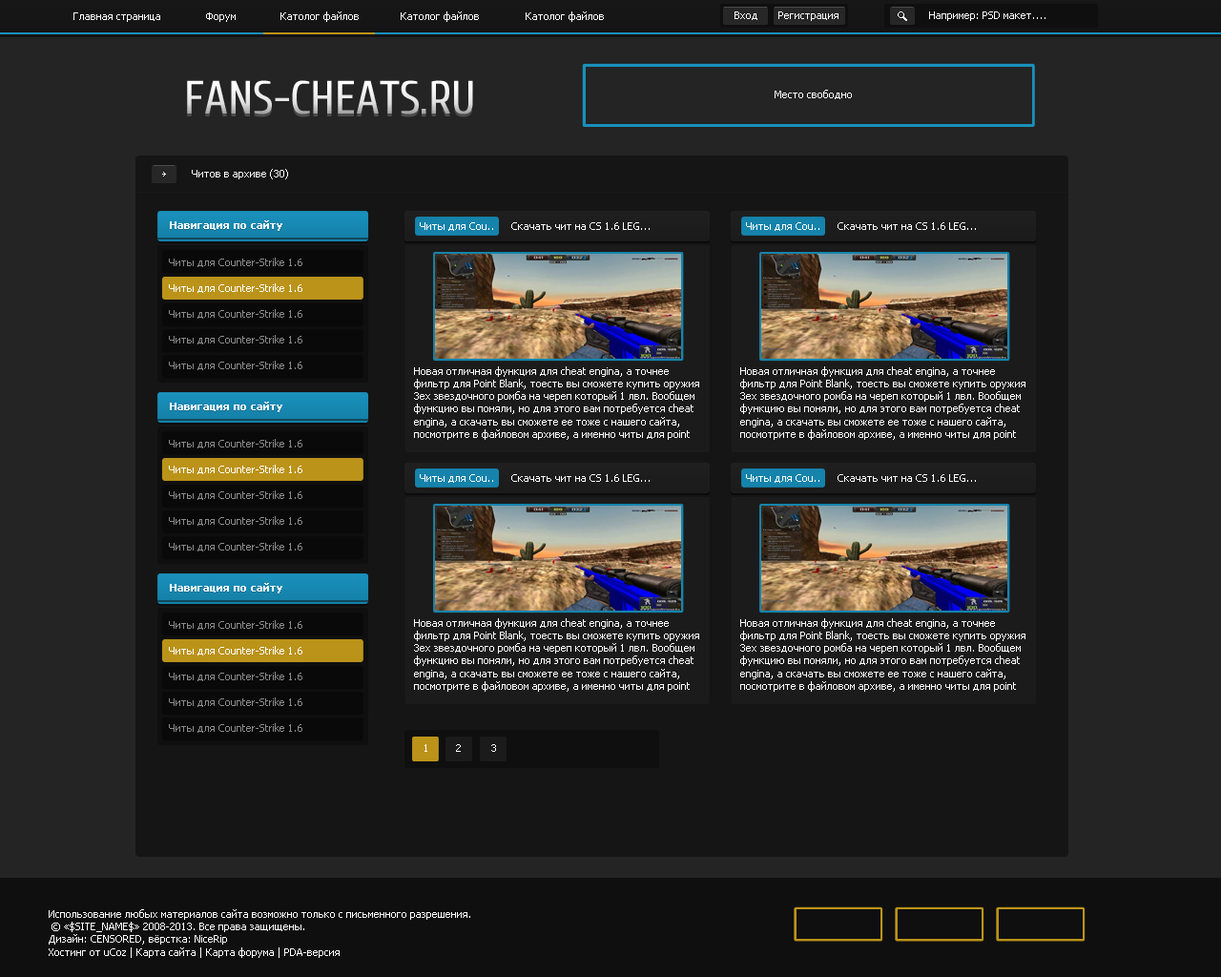
<style>
.page{position:relative;width:1221px;height:977px;background:#242424}
.page>*{position:absolute;margin:0}
.t1{font:10.5px "Tahoma";color:#ffffff}
.t2{font:10.2px "Tahoma";color:#ffffff}
.t3{font:10.5px "Tahoma";color:#ffffff;font-weight:bold}
.t4{font:10.5px "Tahoma";color:#8b8b8b}
</style>
<div class="page">
<p class="t1" style="left:73px;top:12px;width:87px;height:10px">Главная страница</p>
<p class="t1" style="left:206px;top:12px;width:30px;height:10px">Форум</p>
<p class="t1" style="left:280px;top:11px;width:79px;height:11px">Католог файлов</p>
<p class="t1" style="left:401px;top:11px;width:78px;height:11px">Католог файлов</p>
<p class="t1" style="left:526px;top:11px;width:78px;height:11px">Католог файлов</p>
<p class="t1" style="left:734px;top:11px;width:23px;height:9px">Вход</p>
<p class="t1" style="left:778px;top:11px;width:60px;height:10px">Регистрация</p>
<p class="t2" style="left:929px;top:11px;width:116px;height:10px">Например: PSD макет....</p>
<p class="t1" style="left:774px;top:90px;width:78px;height:9px">Место свободно</p>
<p class="t1" style="left:192px;top:169px;width:96px;height:10px">Читов в архиве (30)</p>
<p class="t3" style="left:170px;top:220px;width:112px;height:11px">Навигация по сайту</p>
<p class="t1" style="left:420px;top:222px;width:73px;height:9px">Читы для Cou..</p>
<p class="t1" style="left:511px;top:222px;width:139px;height:8px">Скачать чит на CS 1.6 LEG...</p>
<p class="t1" style="left:746px;top:222px;width:73px;height:9px">Читы для Cou..</p>
<p class="t1" style="left:837px;top:222px;width:139px;height:8px">Скачать чит на CS 1.6 LEG...</p>
<p class="t4" style="left:169px;top:258px;width:133px;height:9px">Читы для Counter-Strike 1.6</p>
<p class="t1" style="left:169px;top:283px;width:133px;height:10px">Читы для Counter-Strike 1.6</p>
<p class="t1" style="left:414px;top:366px;width:285px;height:74px">Новая отличная функция для cheat engina, а точнее фильтр для Point Blank, тоесть вы сможете купить оружия 3ех звездочного ромба на череп который 1 лвл. Вообщем функцию вы поняли, но для этого вам потребуется cheat engina, а скачать вы сможете ее тоже с нашего сайта, посмотрите в файловом архиве, а именно читы для point blank. Чит обходит систему античита фроста.</p>
<p class="t1" style="left:740px;top:366px;width:285px;height:74px">Новая отличная функция для cheat engina, а точнее фильтр для Point Blank, тоесть вы сможете купить оружия 3ех звездочного ромба на череп который 1 лвл. Вообщем функцию вы поняли, но для этого вам потребуется cheat engina, а скачать вы сможете ее тоже с нашего сайта, посмотрите в файловом архиве, а именно читы для point blank. Чит обходит систему античита фроста.</p>
<p class="t3" style="left:170px;top:402px;width:112px;height:10px">Навигация по сайту</p>
<p class="t4" style="left:169px;top:439px;width:133px;height:9px">Читы для Counter-Strike 1.6</p>
<p class="t1" style="left:169px;top:465px;width:133px;height:9px">Читы для Counter-Strike 1.6</p>
<p class="t1" style="left:420px;top:474px;width:73px;height:9px">Читы для Cou..</p>
<p class="t1" style="left:511px;top:474px;width:139px;height:8px">Скачать чит на CS 1.6 LEG...</p>
<p class="t1" style="left:746px;top:474px;width:73px;height:9px">Читы для Cou..</p>
<p class="t1" style="left:837px;top:474px;width:139px;height:8px">Скачать чит на CS 1.6 LEG...</p>
<p class="t3" style="left:170px;top:583px;width:112px;height:10px">Навигация по сайту</p>
<p class="t4" style="left:169px;top:620px;width:133px;height:10px">Читы для Counter-Strike 1.6</p>
<p class="t1" style="left:414px;top:618px;width:285px;height:74px">Новая отличная функция для cheat engina, а точнее фильтр для Point Blank, тоесть вы сможете купить оружия 3ех звездочного ромба на череп который 1 лвл. Вообщем функцию вы поняли, но для этого вам потребуется cheat engina, а скачать вы сможете ее тоже с нашего сайта, посмотрите в файловом архиве, а именно читы для point blank. Чит обходит систему античита фроста.</p>
<p class="t1" style="left:740px;top:618px;width:285px;height:74px">Новая отличная функция для cheat engina, а точнее фильтр для Point Blank, тоесть вы сможете купить оружия 3ех звездочного ромба на череп который 1 лвл. Вообщем функцию вы поняли, но для этого вам потребуется cheat engina, а скачать вы сможете ее тоже с нашего сайта, посмотрите в файловом архиве, а именно читы для point blank. Чит обходит систему античита фроста.</p>
<p class="t1" style="left:169px;top:646px;width:133px;height:9px">Читы для Counter-Strike 1.6</p>
<p class="t1" style="left:424px;top:744px;width:3px;height:8px">1</p>
<p class="t1" style="left:456px;top:744px;width:5px;height:8px">2</p>
<p class="t1" style="left:491px;top:744px;width:5px;height:8px">3</p>
<p class="t1" style="left:49px;top:909px;width:421px;height:49px">Использование любых материалов сайта возможно только с письменного разрешения.<br> © «$SITE_NAME$» 2008-2013. Все права защищены.<br>Дизайн: CENSORED, вёрстка: NiceRip<br>Хостинг от uCoz | Карта сайта | Карта форума | PDA-версия</p>
</div>
